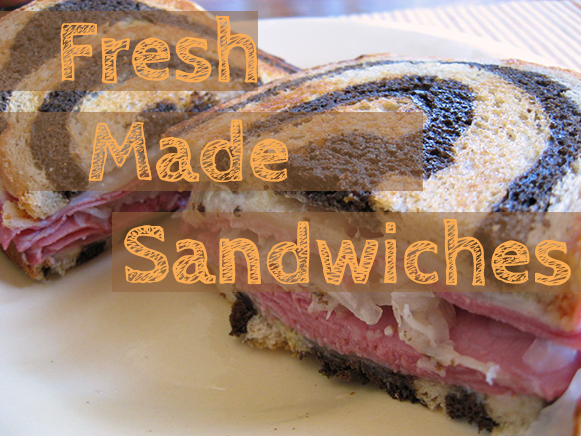
<style>
.page{position:relative;width:581px;height:436px}
.page>*{position:absolute;margin:0}
.t1{font:87.5px "CabinSketch-Bold";color:#faac53}
</style>
<div class="page">
<p class="t1" style="left:60px;top:15px;width:198px;height:69px">Fresh</p>
<p class="t1" style="left:88px;top:119px;width:201px;height:63px">Made</p>
<p class="t1" style="left:124px;top:218px;width:447px;height:68px">Sandwiches</p>
</div>
